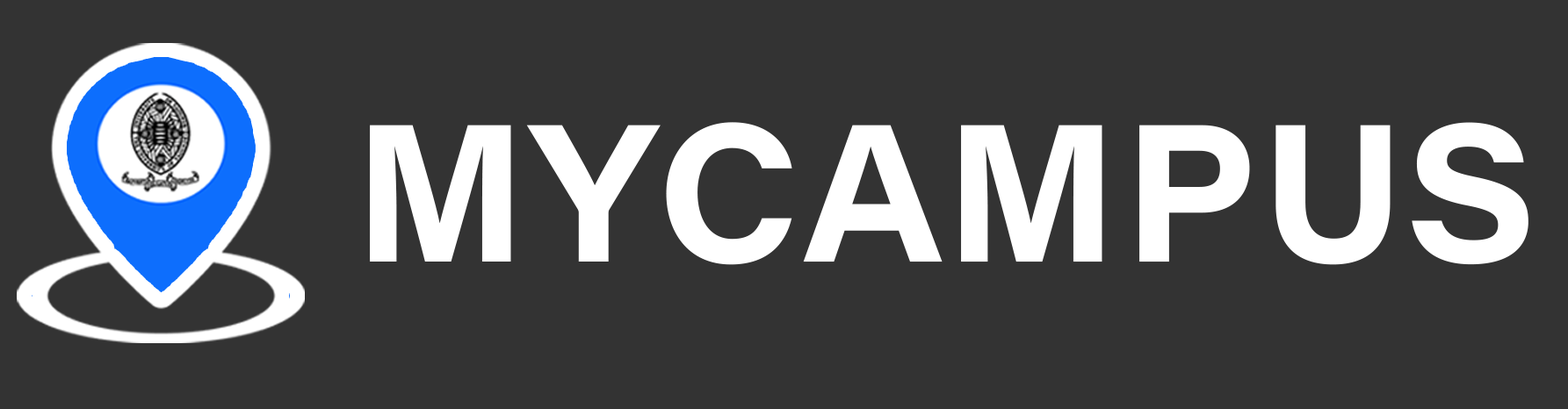
<style>
.page{position:relative;width:1568px;height:409px;background:#333333}
.page>*{position:absolute;margin:0}
.t1{font:193.7px "AcuminConcept-WideBold";letter-spacing:0.03em;color:#ffffff;font-style:italic;scale:0.89 1}
</style>
<div class="page">
<p class="t1" style="left:370px;top:122px;width:1158px;height:143px">MYCAMPUS</p>
</div>
